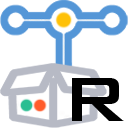
<style>
.page{position:relative;width:128px;height:128px;background:#ffffff}
.page>*{position:absolute;margin:0}
.t1{font:84px "BankGothic-Medium";letter-spacing:-0.01em;color:#000000}
</style>
<div class="page">
<p class="t1" style="left:72px;top:78px;width:52px;height:43px">R</p>
</div>
